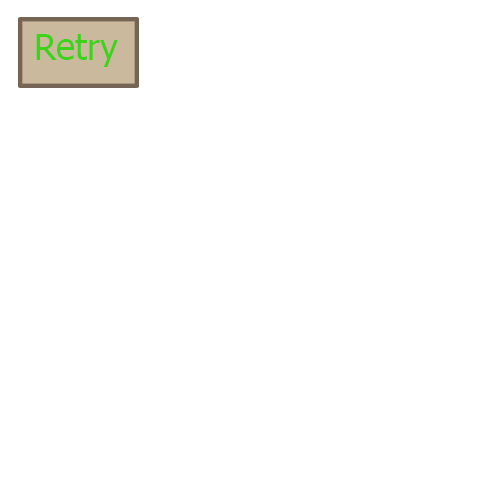
<style>
.page{position:relative;width:500px;height:500px;background:#ffffff}
.page>*{position:absolute;margin:0}
.t1{font:36px "Tahoma";color:#3dd31a}
</style>
<div class="page">
<p class="t1" style="left:36px;top:34px;width:82px;height:33px">Retry</p>
</div>
